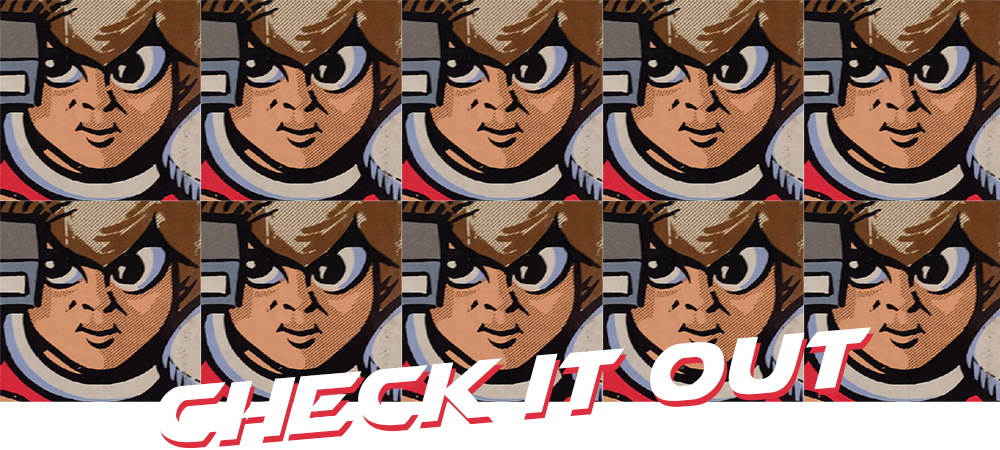
<style>
.page{position:relative;width:1000px;height:450px}
.page>*{position:absolute;margin:0}
.t1{font:106.9px "Airstrike";color:#ffffff}
</style>
<div class="page">
<p class="t1" style="left:156px;top:327px;width:715px;height:116px;rotate:-5deg">check it out</p>
</div>
